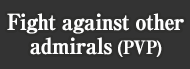
<style>
.page{position:relative;width:190px;height:69px;background:#333333}
.page>*{position:absolute;margin:0}
.t1{font:22px/24px "RyuminPro-ExBold";letter-spacing:-0.04em;color:#ffffff;font-weight:bold;scale:0.9 1}
.t2{font:18px/24px "RyuminPro-ExBold";letter-spacing:-0.04em;color:#ffffff;font-weight:bold;scale:0.9 1}
</style>
<div class="page">
<p class="t1" style="left:7px;top:13px;width:177px;height:44px;text-align:center">Fight against other<br>admirals <span class="t2">(PVP)</span></p>
</div>
